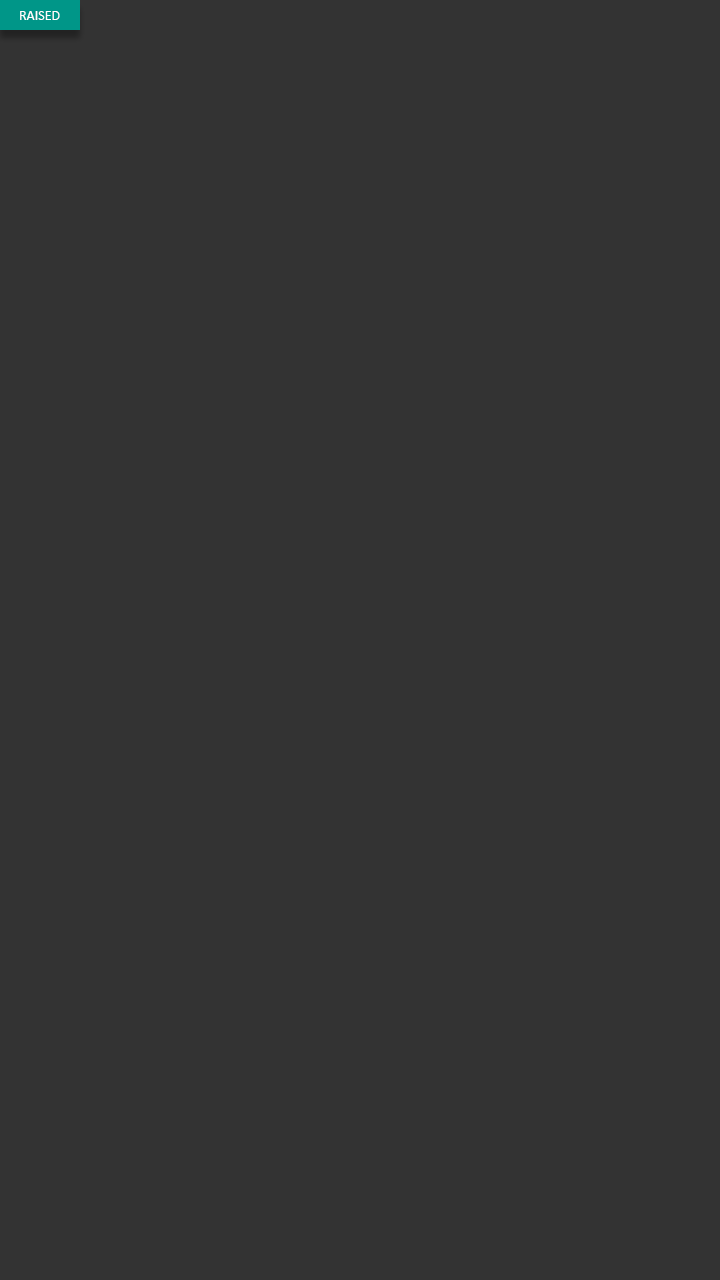
<style>
.page{position:relative;width:720px;height:1280px;background:#333333}
.page>*{position:absolute;margin:0}
.t1{font:24px "Calibri";color:#ffffff}
</style>
<div class="page">
<p class="t1" style="left:20px;top:11px;width:40px;height:9px">RAISED</p>
</div>
